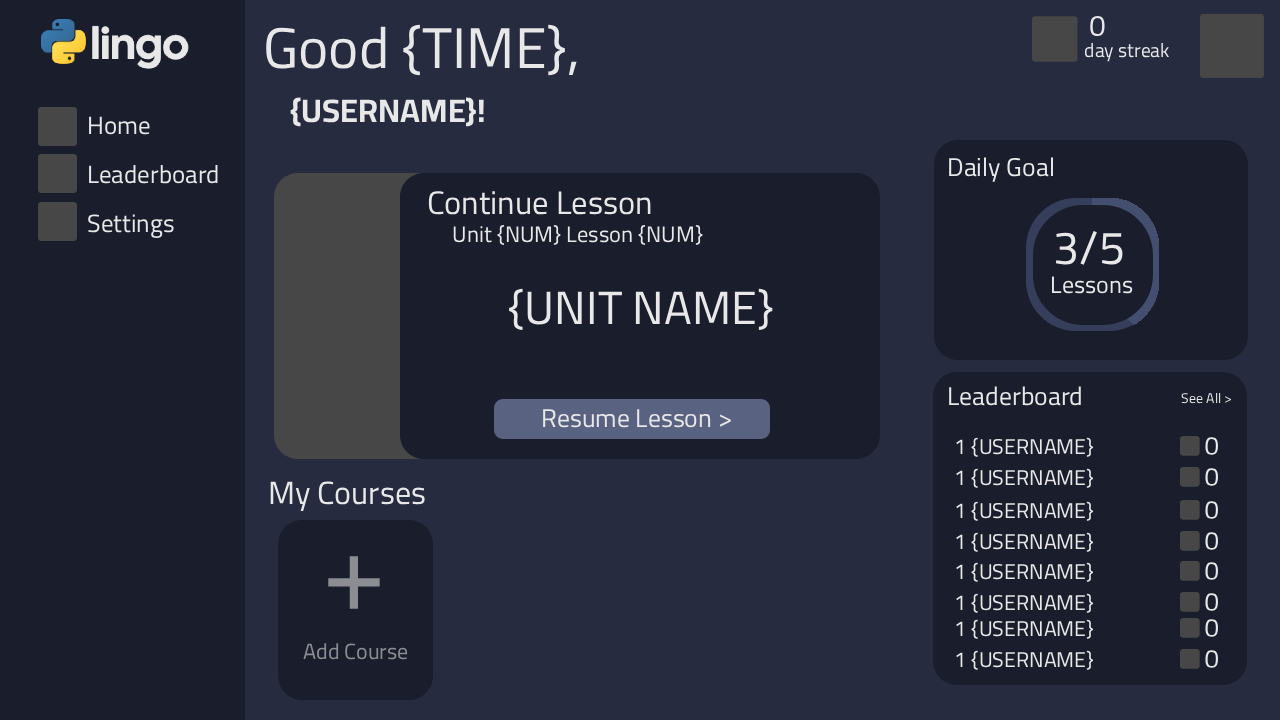
<style>
.page{position:relative;width:1280px;height:720px;background:#1a1e2c}
.page>*{position:absolute;margin:0}
.t1{font:29.5px "Cairo-Regular";color:#e8e8e8}
.t2{font:57.4px "Cairo-Regular";color:#e8e8e8}
.t3{font:19.5px "Cairo-Regular";color:#e8e8e8}
.t4{font:32.5px "Cairo-Bold";color:#e8e8e8}
.t5{font:25px "Cairo-Regular";color:#e8e8e8}
.t6{font:25.7px "Cairo-Regular";color:#e8e8e8}
.t7{font:32.5px "Cairo-Regular";color:#e8e8e8}
.t8{font:22.5px "Cairo-Regular";color:#e8e8e8}
.t9{font:46.5px "Cairo-Regular";color:#e8e8e8}
.t10{font:24px "Cairo-Regular";color:#e8e8e8}
.t11{font:46.6px "Cairo-Regular";color:#e8e8e8}
.t12{font:14px "Cairo-Regular";color:#e8e8e8}
.t13{font:21.4px "Cairo-Regular";color:#e8e8e8}
.t14{font:25.9px "Cairo-Regular";color:#e8e8e8}
.t15{font:32.1px "Cairo-Regular";color:#e8e8e8}
.t16{font:114.2px "Cairo-Regular";color:#8b8d93}
.t17{font:22px "Cairo-Regular";color:#8b8d93}
</style>
<div class="page">
<p class="t1" style="left:1090px;top:16px;width:15px;height:20px;rotate:1deg">0</p>
<p class="t2" style="left:266px;top:24px;width:311px;height:52px">Good {TIME},</p>
<p class="t3" style="left:1084px;top:43px;width:85px;height:19px">day streak</p>
<p class="t4" style="left:290px;top:97px;width:194px;height:30px">{USERNAME}!</p>
<p class="t5" style="left:89px;top:116px;width:61px;height:19px">Home</p>
<p class="t6" style="left:949px;top:157px;width:104px;height:25px">Daily Goal</p>
<p class="t5" style="left:89px;top:165px;width:129px;height:19px">Leaderboard</p>
<p class="t7" style="left:428px;top:191px;width:223px;height:24px">Continue Lesson</p>
<p class="t5" style="left:88px;top:214px;width:86px;height:24px">Settings</p>
<p class="t8" style="left:453px;top:225px;width:250px;height:20px">Unit {NUM} Lesson {NUM}</p>
<p class="t9" style="left:1055px;top:231px;width:68px;height:34px">3/5</p>
<p class="t10" style="left:1052px;top:276px;width:81px;height:18px">Lessons</p>
<p class="t11" style="left:509px;top:288px;width:264px;height:42px">{UNIT NAME}</p>
<p class="t6" style="left:949px;top:386px;width:132px;height:20px">Leaderboard</p>
<p class="t12" style="left:1181px;top:393px;width:50px;height:11px">See All &gt;</p>
<p class="t6" style="left:543px;top:409px;width:188px;height:19px">Resume Lesson &gt;</p>
<p class="t13" style="left:956px;top:437px;width:138px;height:20px">1 {USERNAME}</p>
<p class="t14" style="left:1205px;top:437px;width:13px;height:18px;rotate:1deg">0</p>
<p class="t13" style="left:956px;top:468px;width:138px;height:20px">1 {USERNAME}</p>
<p class="t14" style="left:1205px;top:468px;width:13px;height:18px;rotate:1deg">0</p>
<p class="t15" style="left:270px;top:481px;width:155px;height:30px">My Courses</p>
<p class="t13" style="left:956px;top:501px;width:138px;height:20px">1 {USERNAME}</p>
<p class="t14" style="left:1205px;top:501px;width:13px;height:18px;rotate:1deg">0</p>
<p class="t13" style="left:956px;top:532px;width:138px;height:20px">1 {USERNAME}</p>
<p class="t14" style="left:1205px;top:532px;width:13px;height:18px;rotate:1deg">0</p>
<p class="t16" style="left:328px;top:556px;width:52px;height:53px">+</p>
<p class="t13" style="left:956px;top:562px;width:138px;height:20px">1 {USERNAME}</p>
<p class="t14" style="left:1205px;top:562px;width:13px;height:18px;rotate:1deg">0</p>
<p class="t13" style="left:956px;top:593px;width:138px;height:20px">1 {USERNAME}</p>
<p class="t14" style="left:1205px;top:593px;width:13px;height:18px;rotate:1deg">0</p>
<p class="t13" style="left:956px;top:619px;width:138px;height:20px">1 {USERNAME}</p>
<p class="t14" style="left:1205px;top:619px;width:13px;height:18px;rotate:1deg">0</p>
<p class="t17" style="left:303px;top:643px;width:105px;height:17px">Add Course</p>
<p class="t13" style="left:956px;top:650px;width:138px;height:20px">1 {USERNAME}</p>
<p class="t14" style="left:1205px;top:650px;width:13px;height:18px;rotate:1deg">0</p>
</div>
